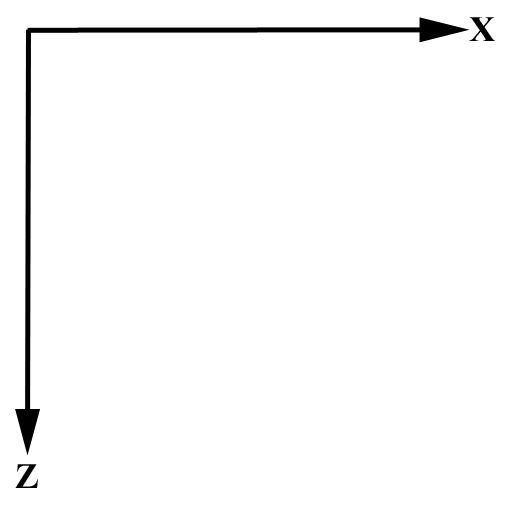
<style>
.page{position:relative;width:512px;height:512px;background:#ffffff}
.page>*{position:absolute;margin:0}
.t1{font:36px "TimesNewRomanPS-BoldMT";color:#000000}
</style>
<div class="page">
<p class="t1" style="left:469px;top:17px;width:26px;height:24px">X</p>
<p class="t1" style="left:15px;top:464px;width:23px;height:24px">Z</p>
</div>
